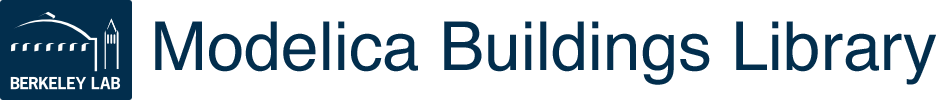
<style>
.page{position:relative;width:936px;height:100px;background:#ffffff}
.page>*{position:absolute;margin:0}
.t1{font:67.4px "Helvetica";color:#022e4d}
</style>
<div class="page">
<p class="t1" style="left:155px;top:21px;width:781px;height:64px">Modelica Buildings Library</p>
</div>
